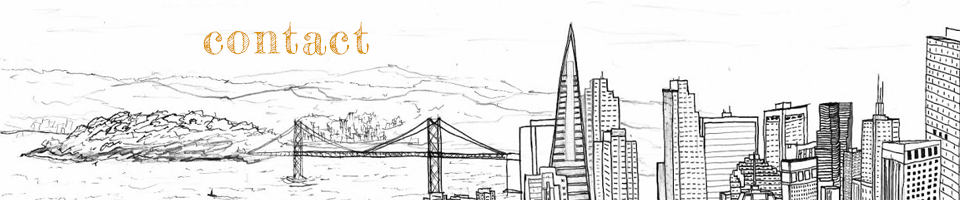
<style>
.page{position:relative;width:960px;height:200px;background:#fefefe}
.page>*{position:absolute;margin:0}
.t1{font:45px "FrederickatheGreat-Regular";letter-spacing:0.05em;color:#d89000}
</style>
<div class="page">
<p class="t1" style="left:203px;top:21px;width:166px;height:35px">contact</p>
</div>
